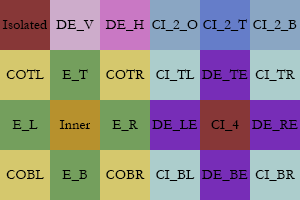
<style>
.page{position:relative;width:300px;height:200px}
.page>*{position:absolute;margin:0}
.t1{font:14.4px "Garamond";color:#000000}
</style>
<div class="page">
<p class="t1" style="left:2px;top:20px;width:45px;height:9px">Isolated</p>
<p class="t1" style="left:56px;top:20px;width:38px;height:11px">DE_V</p>
<p class="t1" style="left:105px;top:20px;width:39px;height:11px">DE_H</p>
<p class="t1" style="left:152px;top:20px;width:46px;height:11px">CI_2_O</p>
<p class="t1" style="left:203px;top:19px;width:44px;height:12px">CI_2_T</p>
<p class="t1" style="left:253px;top:20px;width:44px;height:11px">CI_2_B</p>
<p class="t1" style="left:6px;top:69px;width:38px;height:10px">COTL</p>
<p class="t1" style="left:62px;top:69px;width:26px;height:12px">E_T</p>
<p class="t1" style="left:106px;top:69px;width:39px;height:10px">COTR</p>
<p class="t1" style="left:156px;top:69px;width:39px;height:12px">CI_TL</p>
<p class="t1" style="left:202px;top:69px;width:46px;height:12px">DE_TE</p>
<p class="t1" style="left:255px;top:69px;width:40px;height:12px">CI_TR</p>
<p class="t1" style="left:12px;top:120px;width:26px;height:11px">E_L</p>
<p class="t1" style="left:59px;top:120px;width:31px;height:9px">Inner</p>
<p class="t1" style="left:112px;top:120px;width:26px;height:11px">E_R</p>
<p class="t1" style="left:152px;top:120px;width:46px;height:11px">DE_LE</p>
<p class="t1" style="left:211px;top:120px;width:28px;height:11px">CI_4</p>
<p class="t1" style="left:252px;top:120px;width:46px;height:11px">DE_RE</p>
<p class="t1" style="left:6px;top:170px;width:38px;height:9px">COBL</p>
<p class="t1" style="left:62px;top:170px;width:25px;height:11px">E_B</p>
<p class="t1" style="left:106px;top:170px;width:39px;height:9px">COBR</p>
<p class="t1" style="left:156px;top:170px;width:39px;height:11px">CI_BL</p>
<p class="t1" style="left:202px;top:170px;width:46px;height:11px">DE_BE</p>
<p class="t1" style="left:255px;top:170px;width:40px;height:11px">CI_BR</p>
</div>
